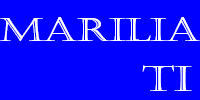
<style>
.page{position:relative;width:200px;height:100px;background:#0000ff}
.page>*{position:absolute;margin:0}
.t1{font:33.4px "Castellar";color:#ffffff;scale:1.23 1}
.t2{font:35.2px "Castellar";color:#ffffff;scale:1.27 1}
</style>
<div class="page">
<p class="t1" style="left:0px;top:17px;width:200px;height:24px">Marilia</p>
<p class="t2" style="left:142px;top:65px;width:50px;height:26px">TI</p>
</div>
